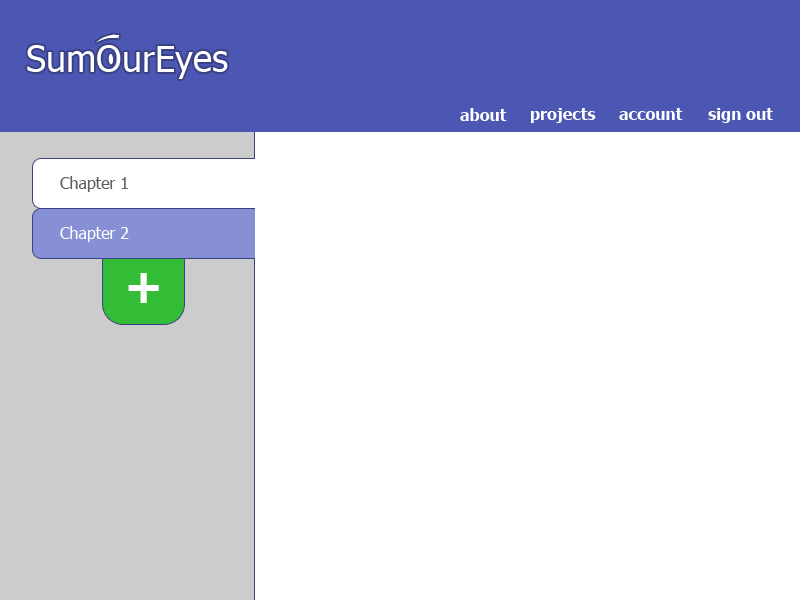
<style>
.page{position:relative;width:800px;height:600px;background:#ffffff}
.page>*{position:absolute;margin:0}
.t1{font:36px "Tahoma";color:#ffffff}
.t2{font:16px "Tahoma-Bold";color:#ffffff}
.t3{font:16px "Tahoma";color:#615d5d}
.t4{font:16px "Tahoma";color:#ffffff}
.t5{font:48px "Tahoma-Bold";color:#ffffff}
</style>
<div class="page">
<p class="t1" style="left:27px;top:45px;width:201px;height:34px">SumOurEyes</p>
<p class="t2" style="left:460px;top:108px;width:47px;height:13px">about</p>
<p class="t2" style="left:531px;top:108px;width:65px;height:15px">projects</p>
<p class="t2" style="left:619px;top:108px;width:64px;height:12px">account</p>
<p class="t2" style="left:708px;top:108px;width:65px;height:15px">sign out</p>
<p class="t3" style="left:60px;top:176px;width:68px;height:16px">Chapter 1</p>
<p class="t4" style="left:60px;top:226px;width:69px;height:16px">Chapter 2</p>
<p class="t5" style="left:128px;top:273px;width:31px;height:30px">+</p>
</div>
